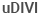
<style>
.page{position:relative;width:39px;height:16px;background:#ffffff}
.page>*{position:absolute;margin:0}
.t1{font:15px "Roboto-Medium";color:#4a4a4a}
</style>
<div class="page">
<p class="t1" style="left:2px;top:2px;width:36px;height:11px">uDIVI</p>
</div>
